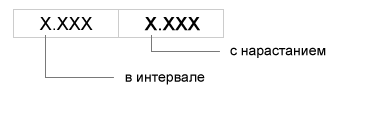
<style>
.page{position:relative;width:368px;height:127px;background:#ffffff}
.page>*{position:absolute;margin:0}
.t1{font:18px "ArialMT";color:#000000}
.t2{font:18px "ArialMT";color:#000000;font-weight:bold}
.t3{font:14px "ArialMT";color:#000000}
</style>
<div class="page">
<p class="t1" style="left:39px;top:17px;width:54px;height:13px">X.XXX</p>
<p class="t2" style="left:144px;top:17px;width:56px;height:14px">X.XXX</p>
<p class="t3" style="left:230px;top:47px;width:96px;height:11px">с нарастанием</p>
<p class="t3" style="left:125px;top:74px;width:80px;height:11px">в интервале</p>
</div>
